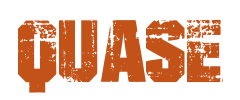
<style>
.page{position:relative;width:240px;height:100px;background:#ffffff}
.page>*{position:absolute;margin:0}
.t1{font:120px "BADGRUNGE";color:#c35218}
</style>
<div class="page">
<p class="t1" style="left:18px;top:19px;width:203px;height:74px">QUASE</p>
</div>
